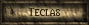
<style>
.page{position:relative;width:89px;height:25px}
.page>*{position:absolute;margin:0}
.t1{font:11px "Morpheus";color:#321e02}
</style>
<div class="page">
<p class="t1" style="left:28px;top:7px;width:33px;height:9px">Teclas</p>
</div>
